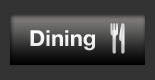
<style>
.page{position:relative;width:155px;height:80px;background:#333333}
.page>*{position:absolute;margin:0}
.t1{font:22px "HelveticaNeue-Bold";color:#ffffff}
</style>
<div class="page">
<p class="t1" style="left:30px;top:30px;width:65px;height:21px">Dining</p>
</div>
